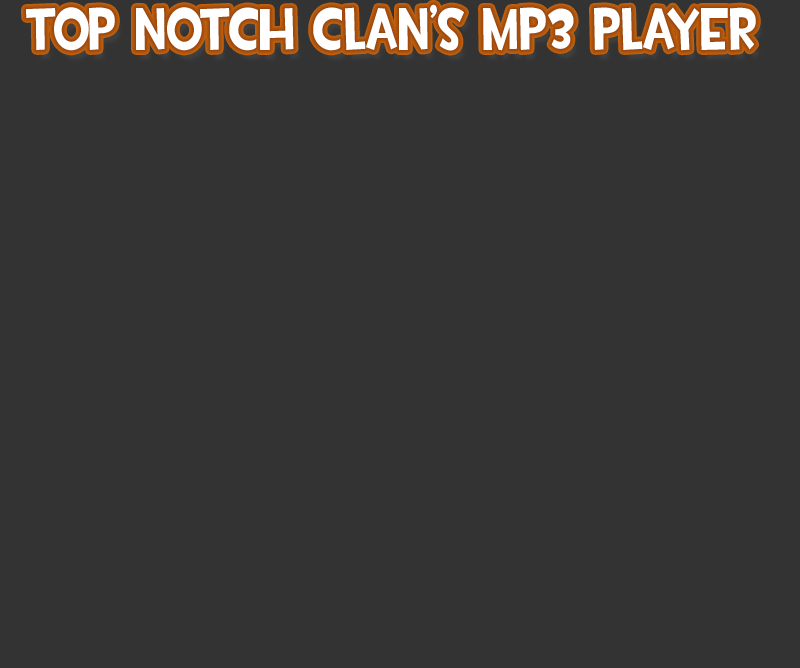
<style>
.page{position:relative;width:800px;height:668px;background:#333333}
.page>*{position:absolute;margin:0}
.t1{font:60px "TF2Build";color:#ffffff;scale:0.79 1}
</style>
<div class="page">
<p class="t1" style="left:26px;top:4px;width:730px;height:47px">top notch clan’s mp3 player</p>
</div>
